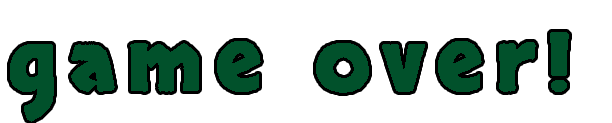
<style>
.page{position:relative;width:612px;height:123px;background:#ffffff}
.page>*{position:absolute;margin:0}
.t1{font:82px "Skranji-Bold";letter-spacing:0.15em;color:#01512b}
</style>
<div class="page">
<p class="t1" style="left:10px;top:32px;width:559px;height:90px">game over!</p>
</div>
